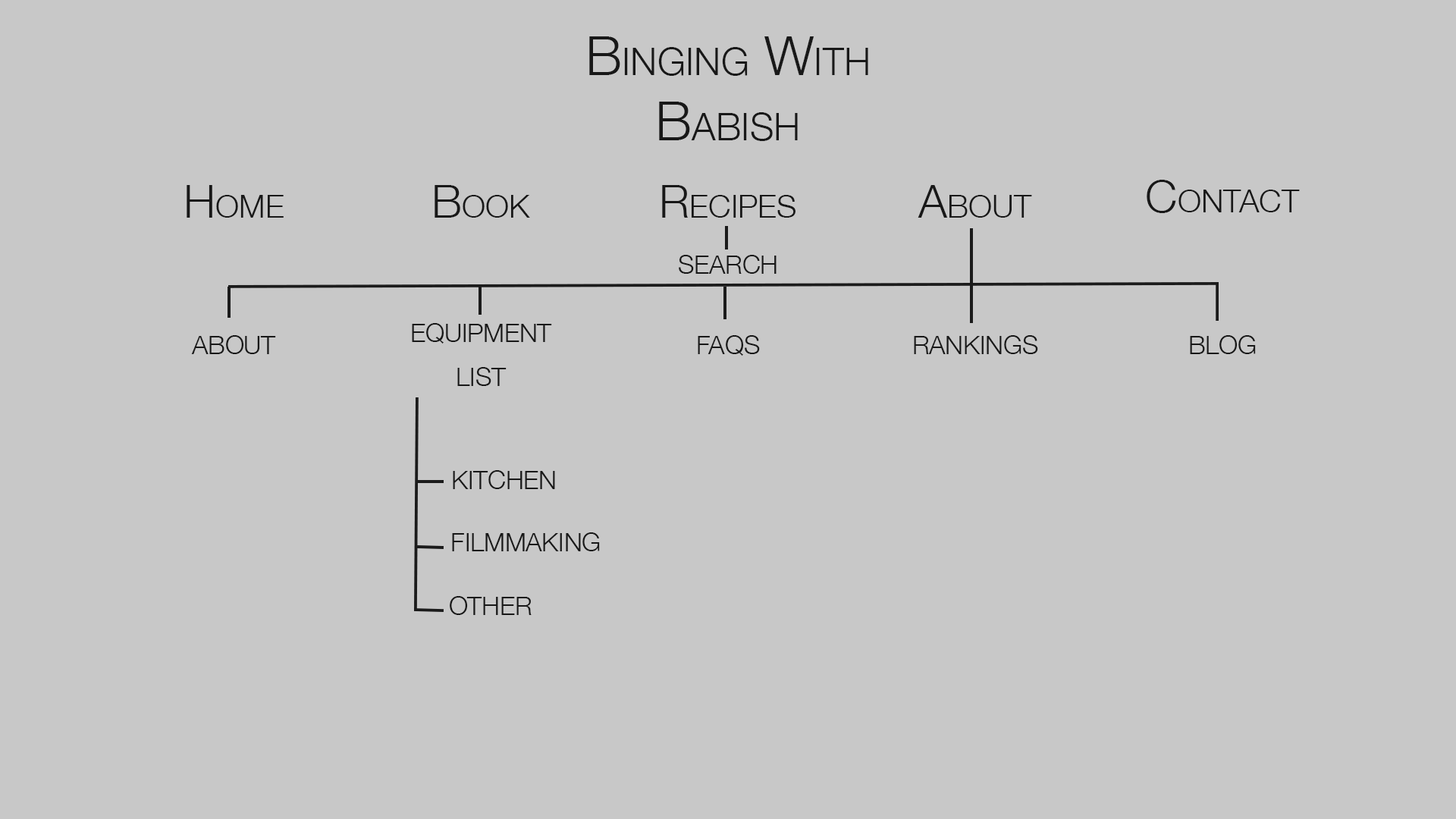
<style>
.page{position:relative;width:1456px;height:819px;background:#c8c8c8}
.page>*{position:absolute;margin:0}
.t1{font:54.6px "HelveticaNeue-Light";color:#181818;font-variant:small-caps}
.t2{font:45.5px "HelveticaNeue-Light";color:#181818;font-variant:small-caps}
.t3{font:36.4px "HelveticaNeue-Light";color:#181818;font-variant:small-caps}
</style>
<div class="page">
<p class="t1" style="left:589px;top:36px;width:279px;height:105px;text-align:center">Binging With Babish</p>
<p class="t2" style="left:187px;top:185px;width:97px;height:33px">Home</p>
<p class="t2" style="left:435px;top:185px;width:95px;height:33px">Book</p>
<p class="t2" style="left:662px;top:185px;width:133px;height:33px">Recipes</p>
<p class="t2" style="left:918px;top:185px;width:114px;height:33px">About</p>
<p class="t2" style="left:1147px;top:180px;width:153px;height:33px">Contact</p>
<p class="t3" style="left:679px;top:255px;width:98px;height:19px">search</p>
<p class="t3" style="left:412px;top:323px;width:140px;height:63px;text-align:center">equipment list</p>
<p class="t3" style="left:191px;top:335px;width:85px;height:19px">about</p>
<p class="t3" style="left:698px;top:335px;width:62px;height:21px">faqs</p>
<p class="t3" style="left:914px;top:335px;width:124px;height:19px">rankings</p>
<p class="t3" style="left:1190px;top:335px;width:66px;height:19px">blog</p>
<p class="t3" style="left:453px;top:470px;width:102px;height:19px">kitchen</p>
<p class="t3" style="left:452px;top:532px;width:148px;height:19px">filmmaking</p>
<p class="t3" style="left:450px;top:596px;width:82px;height:19px">other</p>
</div>
